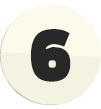
<style>
.page{position:relative;width:101px;height:109px;background:#fcfbeb}
.page>*{position:absolute;margin:0}
.t1{font:72px "MovaviGrotesqueBlack";color:#282828}
</style>
<div class="page">
<p class="t1" style="left:31px;top:29px;width:40px;height:53px">6</p>
</div>
